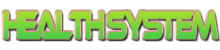
<style>
.page{position:relative;width:220px;height:50px;background:#ffffff}
.page>*{position:absolute;margin:0}
.t1{font:41px "EthnocentricRg-Regular";letter-spacing:-0.16em;scale:0.53 1}
</style>
<div class="page">
<p class="t1" style="left:3px;top:11px;width:215px;height:28px">HEALTH SYSTEM</p>
</div>
